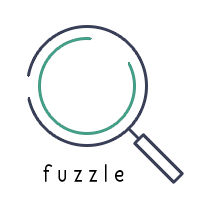
<style>
.page{position:relative;width:210px;height:210px;background:#ffffff}
.page>*{position:absolute;margin:0}
.t1{font:29.1px "KalosSans-Book";letter-spacing:0.26em;color:#000000;scale:0.86 1}
</style>
<div class="page">
<p class="t1" style="left:43px;top:164px;width:81px;height:18px">fuzzle</p>
</div>
